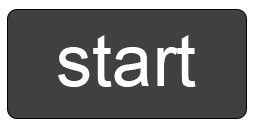
<style>
.page{position:relative;width:256px;height:128px;background:#404040}
.page>*{position:absolute;margin:0}
.t1{font:72px "ArialMT";color:#ffffff}
</style>
<div class="page">
<p class="t1" style="left:58px;top:35px;width:138px;height:52px">start</p>
</div>
